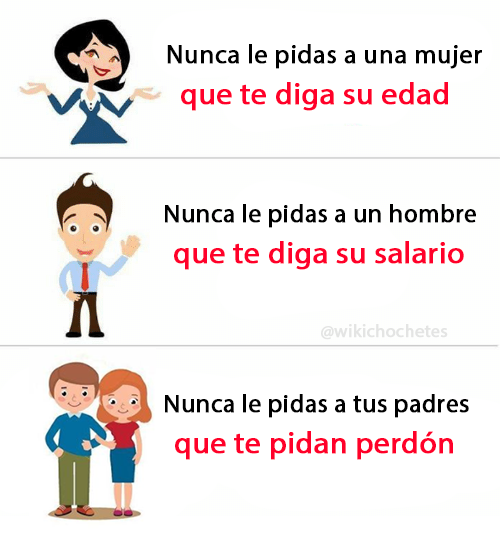
<style>
.page{position:relative;width:500px;height:538px;background:#ffffff}
.page>*{position:absolute;margin:0}
.t1{font:26.5px "MyriadPro-Regular";color:#000000;font-weight:bold}
.t2{font:31.1px "MyriadPro-Regular";color:#ff002a;font-weight:bold}
.t3{font:25.4px "MyriadPro-Regular";color:#000000;font-weight:bold}
.t4{font:18px "MyriadPro-Regular";color:#e4e5e3;font-weight:bold}
</style>
<div class="page">
<p class="t1" style="left:167px;top:44px;width:315px;height:25px">Nunca le pidas a una mujer</p>
<p class="t2" style="left:181px;top:82px;width:267px;height:29px">que te diga su edad</p>
<p class="t3" style="left:165px;top:204px;width:311px;height:24px">Nunca le pidas a un hombre</p>
<p class="t2" style="left:174px;top:241px;width:290px;height:29px">que te diga su salario</p>
<p class="t4" style="left:321px;top:324px;width:127px;height:16px">@wikichochetes</p>
<p class="t3" style="left:165px;top:394px;width:304px;height:24px">Nunca le pidas a tus padres</p>
<p class="t2" style="left:175px;top:431px;width:278px;height:29px">que te pidan perdón</p>
</div>
